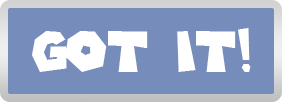
<style>
.page{position:relative;width:282px;height:102px;background:#768cbb}
.page>*{position:absolute;margin:0}
.t1{font:54.8px "SuperMarioGalaxy";color:#ffffff}
</style>
<div class="page">
<p class="t1" style="left:32px;top:28px;width:219px;height:44px">GOT IT!</p>
</div>
